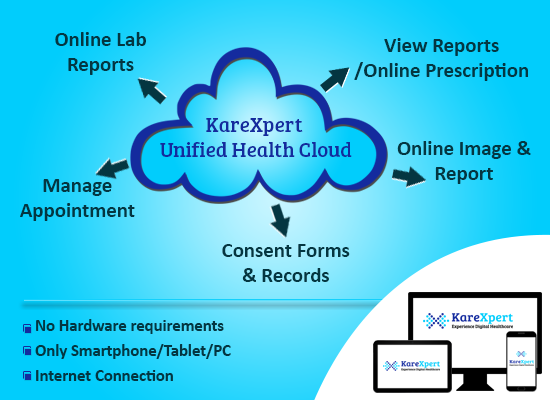
<style>
.page{position:relative;width:550px;height:400px}
.page>*{position:absolute;margin:0}
.t1{font:20.8px "Calibri-Bold";color:#043641}
.t2{font:20.8px "BreeSerif-Regular";color:#142b9e}
.t3{font:16.7px/25px "Calibri-Bold";color:#043641}
</style>
<div class="page">
<p class="t1" style="left:55px;top:32px;width:91px;height:43px;text-align:center">Online Lab Reports</p>
<p class="t1" style="left:354px;top:38px;width:174px;height:43px;text-align:center">View Reports<br>/Online Prescription</p>
<p class="t2" style="left:160px;top:118px;width:192px;height:39px;text-align:center">KareXpert <br>Unified Health Cloud</p>
<p class="t1" style="left:397px;top:141px;width:134px;height:43px;text-align:center">Online Image &amp; Report</p>
<p class="t1" style="left:20px;top:179px;width:115px;height:42px;text-align:center">Manage Appointment &amp; Patients</p>
<p class="t1" style="left:222px;top:244px;width:128px;height:38px;text-align:center">Consent Forms &amp; Records</p>
<p class="t3" style="left:35px;top:319px;width:196px;height:62px">No Hardware requirements<br>Only Smartphone/Tablet/PC<br>Internet Connection</p>
</div>
